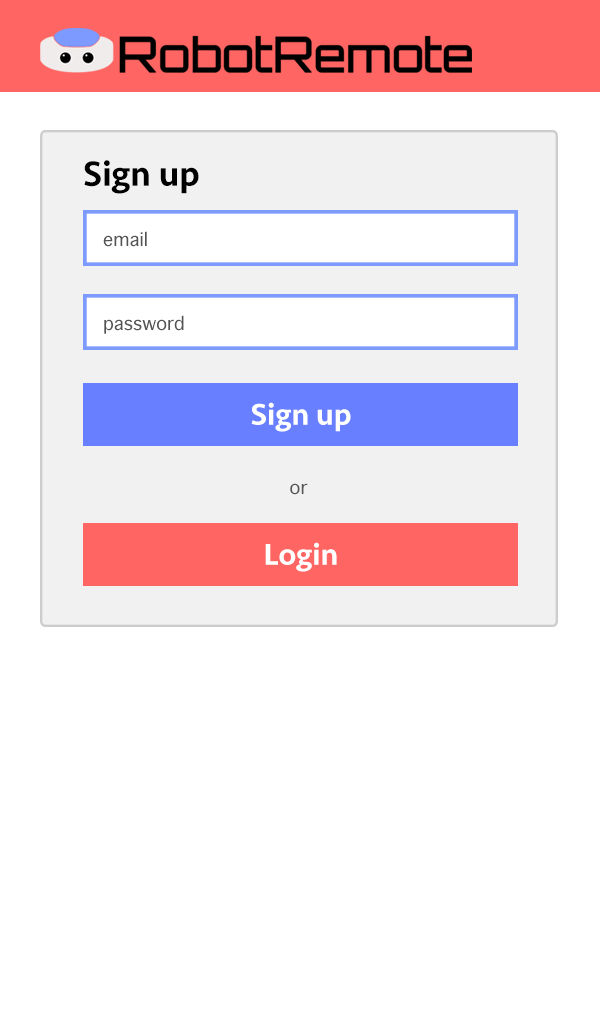
<style>
.page{position:relative;width:600px;height:1024px;background:#ffffff}
.page>*{position:absolute;margin:0}
.t1{font:36px "Seravek-Medium";color:#000000}
.t2{font:18px "Geneva";color:#545454}
.t3{font:31.1px "Seravek-Medium";color:#ffffff}
</style>
<div class="page">
<p class="t1" style="left:84px;top:160px;width:115px;height:34px">Sign up</p>
<p class="t2" style="left:103px;top:231px;width:44px;height:16px">email</p>
<p class="t2" style="left:104px;top:315px;width:80px;height:19px">password</p>
<p class="t3" style="left:251px;top:402px;width:100px;height:30px">Sign up</p>
<p class="t2" style="left:290px;top:483px;width:18px;height:12px">or</p>
<p class="t3" style="left:265px;top:542px;width:72px;height:30px">Login</p>
</div>
